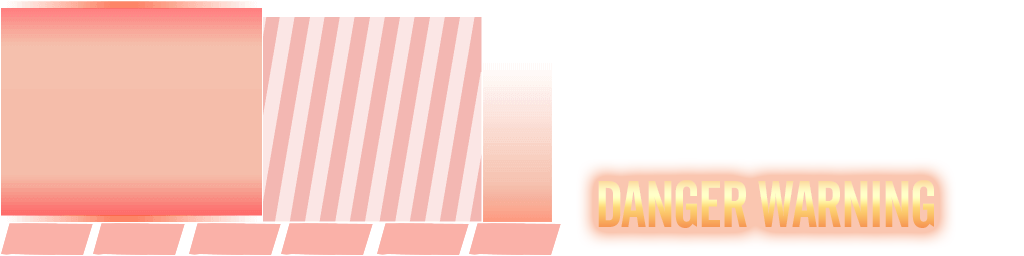
<style>
.page{position:relative;width:1024px;height:256px;background:#ffffff}
.page>*{position:absolute;margin:0}
.t1{font:65px "UTM-Cafeta";letter-spacing:-0.025em;text-transform:uppercase}
</style>
<div class="page">
<p class="t1" style="left:598px;top:180px;width:336px;height:48px">Danger Warning</p>
</div>
